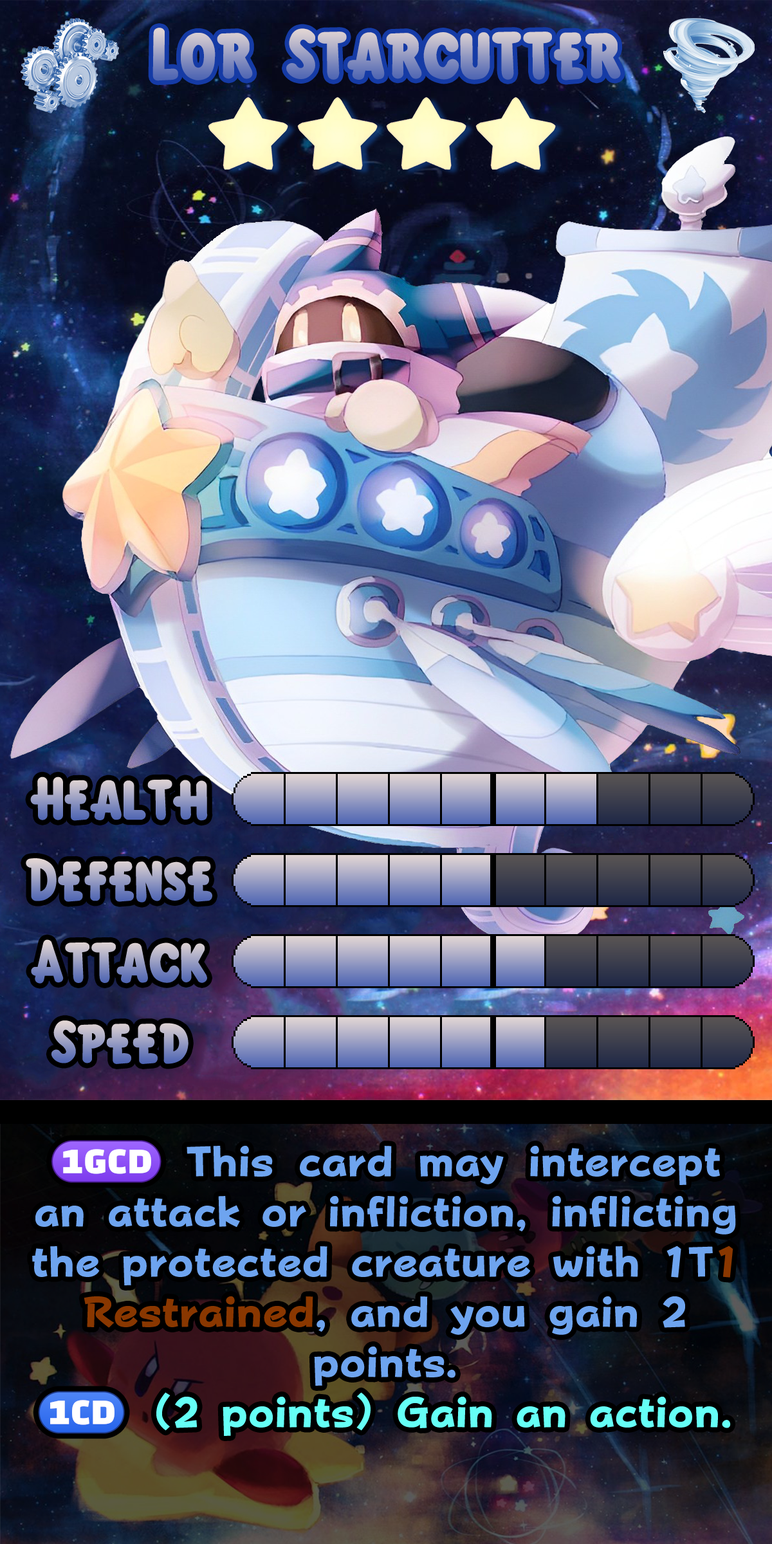
<style>
.page{position:relative;width:772px;height:1544px}
.page>*{position:absolute;margin:0}
.t1{font:109.4px "KirbyClassic"}
.t2{font:92.7px "KirbyClassic"}
.t3{font:72.7px/50.2px "FOTPopHappinessStrp-ExtraBold";color:#6ea4ef}
.t4{font:43.3px/50.2px "stoogedings-Regular";color:#6ea4ef}
.t5{font:72.7px/50.2px "FOTPopHappinessStrp-ExtraBold";color:#893700}
.t6{font:74.2px/50.2px "stoogedings-Regular";letter-spacing:0.633em;color:#65fff6}
.t7{font:72.7px/50.2px "FOTPopHappinessStrp-ExtraBold";color:#65fff6}
</style>
<div class="page">
<p class="t1" style="left:152px;top:28px;width:469px;height:53px">Lor Starcutter</p>
<p class="t2" style="left:30px;top:777px;width:178px;height:44px">Health</p>
<p class="t2" style="left:26px;top:858px;width:186px;height:45px">Defense</p>
<p class="t2" style="left:31px;top:939px;width:176px;height:45px">Attack</p>
<p class="t2" style="left:51px;top:1021px;width:138px;height:43px">Speed</p>
<p class="t3" style="left:32px;top:1140px;width:704px;height:296px;text-align:center"><span class="t4">(1GCD) </span>This card may intercept an attack or infliction, inflicting the protected creature with 1T<span class="t5">1 Restrained</span>, and you gain 2 points.<br><span class="t6">(1CD)</span><span class="t7">(2 points) Gain an action.</span></p>
</div>
